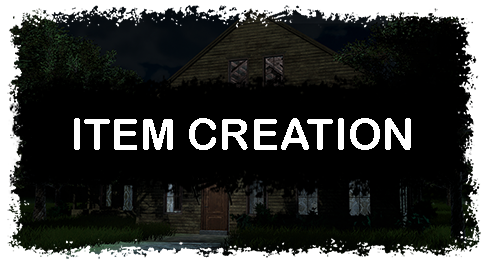
<style>
.page{position:relative;width:487px;height:267px;background:#000000}
.page>*{position:absolute;margin:0}
.t1{font:43.5px "ArialRoundedMTBold";color:#ffffff}
</style>
<div class="page">
<p class="t1" style="left:74px;top:118px;width:337px;height:32px">ITEM CREATION</p>
</div>
